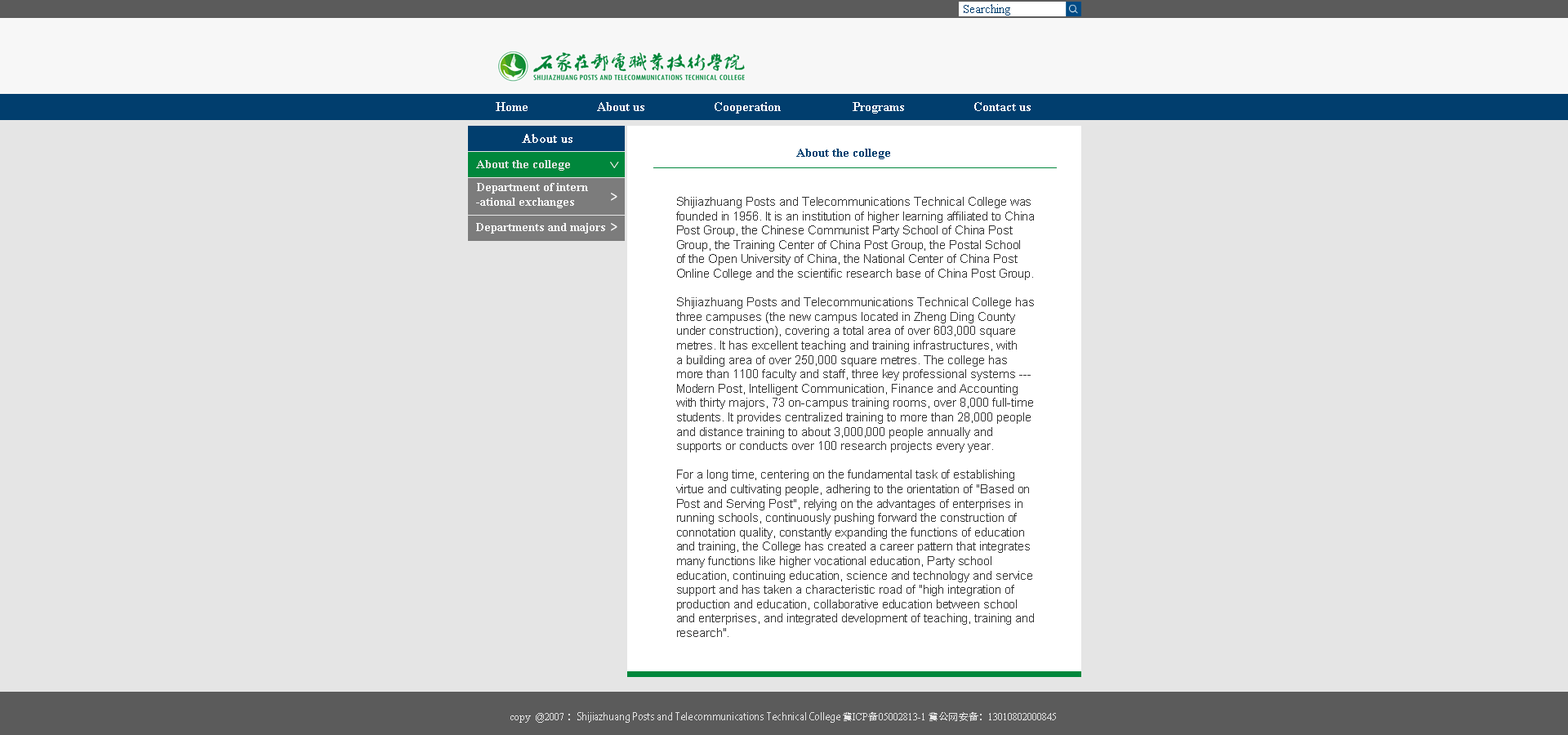
<style>
.page{position:relative;width:1568px;height:735px;background:#e5e5e5}
.page>*{position:absolute;margin:0}
.t1{font:12px "TimesNewRomanPSMT";color:#013e6e}
.t2{font:13.1px "TimesNewRomanPS-BoldMT";color:#ffffff}
.t3{font:13.1px "TimesNewRomanPSMT";color:#ffffff;font-weight:bold}
.t4{font:12px "TimesNewRomanPS-BoldMT";color:#013e6e}
.t5{font:12px "TimesNewRomanPS-BoldMT";color:#e5e5e5}
.t6{font:16.6px "TimesNewRomanPSMT";font-weight:bold;scale:0.65 1}
.t7{font:12px "TimesNewRomanPS-BoldMT";color:#f7f7f7}
.t8{font:16.6px "TimesNewRomanPSMT";color:#f7f7f7;font-weight:bold;scale:0.65 1}
.t9{font:12px "ArialMT";color:#323232}
.t10{font:9.8px "AdobeHeitiStd-Regular";color:#e5e5e5}
.t11{font:9.8px "TimesNewRomanPSMT";color:#e5e5e5}
</style>
<div class="page">
<p class="t1" style="left:964px;top:4px;width:46px;height:12px">Searching</p>
<p class="t2" style="left:496px;top:102px;width:535px;height:12px">Home                     About us                     Cooperation                      Programs                     Contact us</p>
<p class="t3" style="left:522px;top:134px;width:50px;height:9px">About us</p>
<p class="t4" style="left:796px;top:149px;width:94px;height:10px">About the college</p>
<p class="t5" style="left:476px;top:160px;width:94px;height:11px">About the college</p>
<p class="t6" style="left:610px;top:162px;width:9px;height:6px;rotate:90deg">&gt;</p>
<p class="t7" style="left:476px;top:183px;width:112px;height:25px">Department of intern<br>-ational exchanges</p>
<p class="t8" style="left:611px;top:193px;width:6px;height:8px">&gt;</p>
<p class="t9" style="left:676px;top:197px;width:358px;height:440px">Shijiazhuang Posts and Telecommunications Technical College was founded in 1956. It is an institution of higher learning affiliated to China Post Group, the Chinese Communist Party School of China Post Group, the Training Center of China Post Group, the Postal School of the Open University of China, the National Center of China Post Online College and the scientific research base of China Post Group.<br><br>Shijiazhuang Posts and Telecommunications Technical College has three campuses (the new campus located in Zheng Ding County under construction), covering a total area of over 603,000 square metres. It has excellent teaching and training infrastructures, with a building area of over 250,000 square metres. The college has more than 1100 faculty and staff, three key professional systems --- Modern Post, Intelligent Communication, Finance and Accounting with thirty majors, 73 on-campus training rooms, over 8,000 full-time students. It provides centralized training to more than 28,000 people and distance training to about 3,000,000 people annually and supports or conducts over 100 research projects every year.<br><br>For a long time, centering on the fundamental task of establishing virtue and cultivating people, adhering to the orientation of "Based on Post and Serving Post", relying on the advantages of enterprises in running schools, continuously pushing forward the construction of connotation quality, constantly expanding the functions of education and training, the College has created a career pattern that integrates many functions like higher vocational education, Party school education, continuing education, science and technology and service support and has taken a characteristic road of "high integration of production and education, collaborative education between school and enterprises, and integrated development of teaching, training and research".</p>
<p class="t7" style="left:476px;top:223px;width:129px;height:11px">Departments and majors</p>
<p class="t8" style="left:611px;top:223px;width:6px;height:8px">&gt;</p>
<p class="t10" style="left:510px;top:712px;width:546px;height:11px"><span class="t11">copy  @2007 </span>：Shijiazhuang Posts and Telecommunications Technical College 冀<span class="t11">ICP</span>备<span class="t11">05002813-1 </span>冀公网安备：<span class="t11">13010802000845</span></p>
</div>
